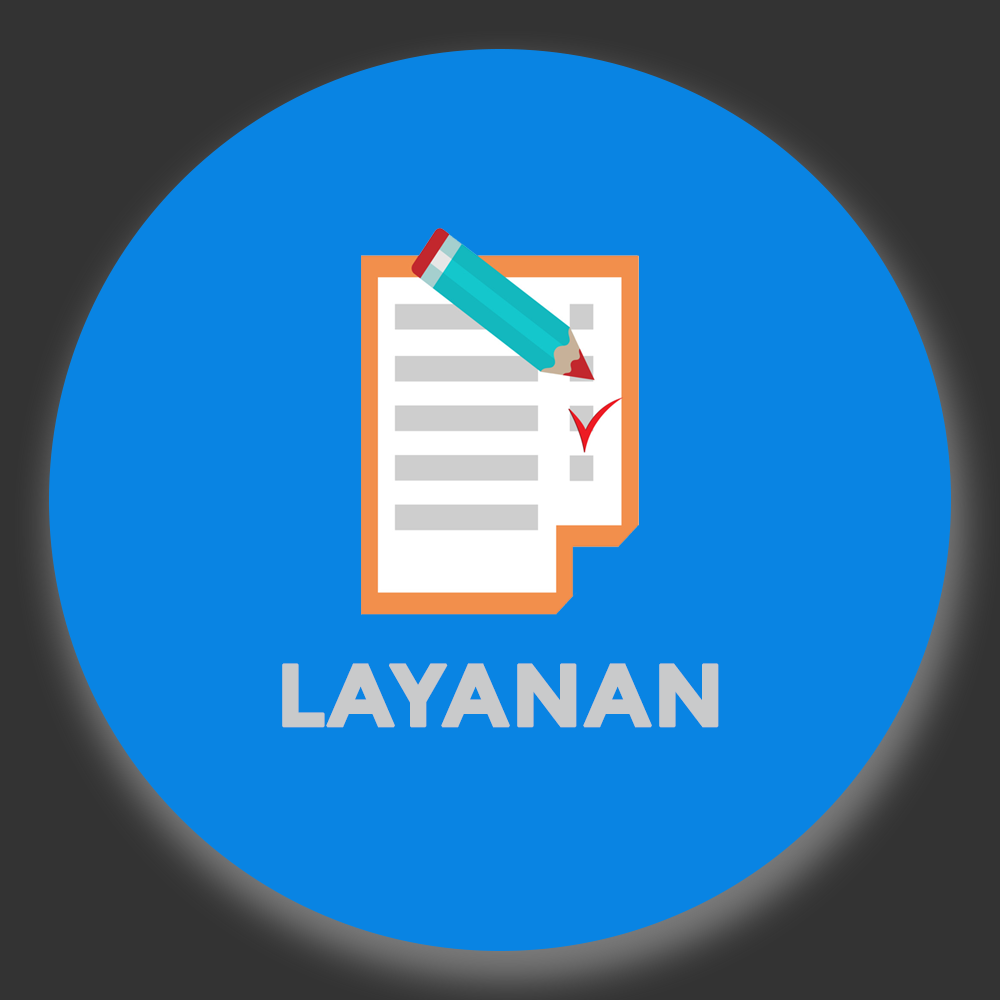
<style>
.page{position:relative;width:1000px;height:1000px;background:#0984e3}
.page>*{position:absolute;margin:0}
.t1{font:87.5px "Montserrat-Bold";color:#c9cacb;font-weight:bold}
</style>
<div class="page">
<p class="t1" style="left:282px;top:663px;width:437px;height:65px">LAYANAN</p>
</div>
